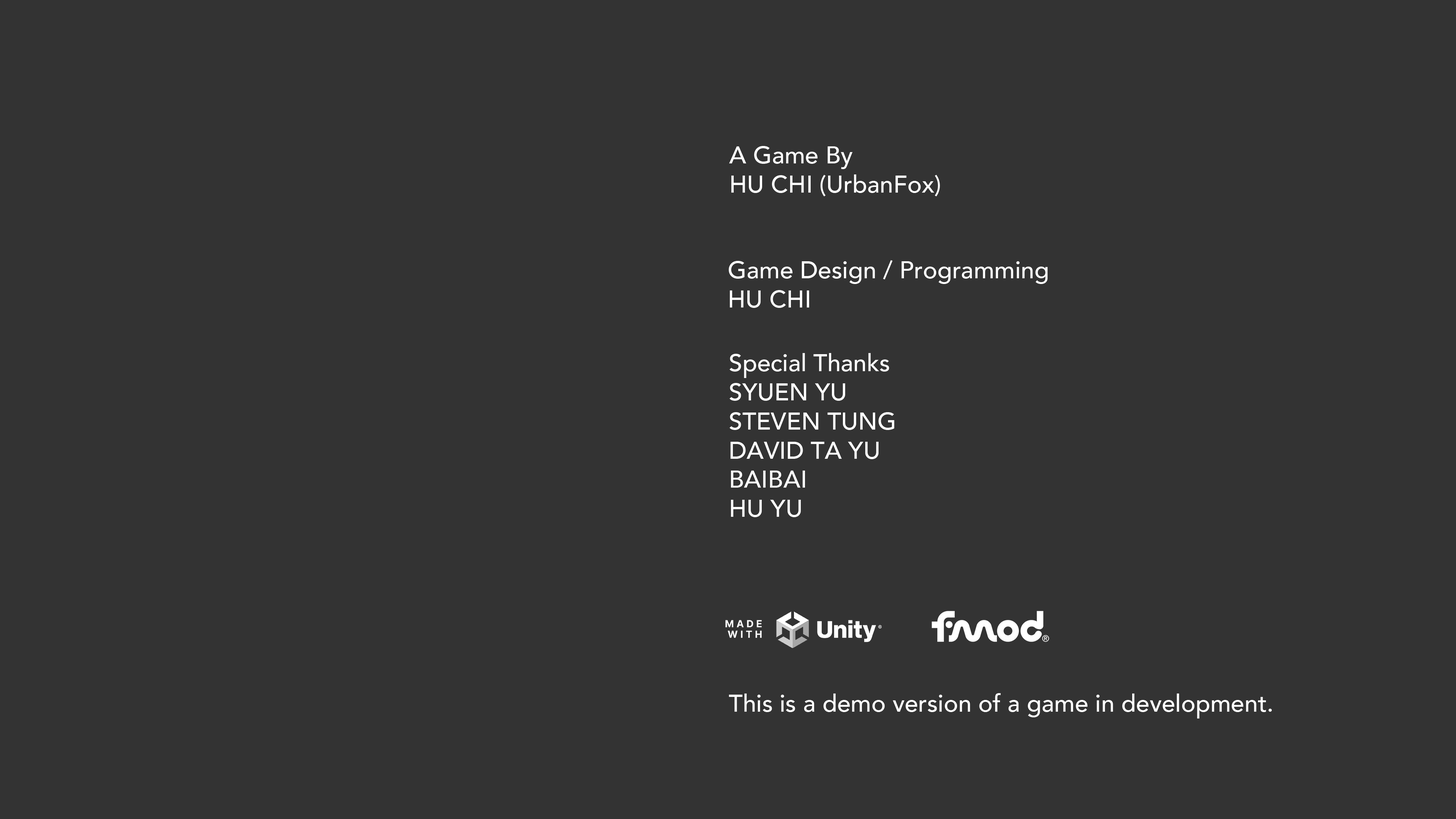
<style>
.page{position:relative;width:1456px;height:819px;background:#333333}
.page>*{position:absolute;margin:0}
.t1{font:24.3px "Avenir-Medium";color:#ffffff}
</style>
<div class="page">
<p class="t1" style="left:729px;top:146px;width:211px;height:50px">A Game By<br>HU CHI (UrbanFox)</p>
<p class="t1" style="left:729px;top:260px;width:319px;height:48px">Game Design / Programming<br>HU CHI</p>
<p class="t1" style="left:730px;top:353px;width:164px;height:164px">Special Thanks<br>SYUEN YU<br>STEVEN TUNG<br>DAVID TA YU<br>BAIBAI<br>HU YU</p>
<p class="t1" style="left:729px;top:693px;width:543px;height:26px">This is a demo version of a game in development.</p>
</div>
